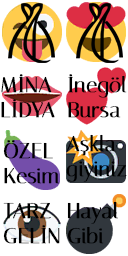
<style>
.page{position:relative;width:128px;height:256px;background:#ffffff}
.page>*{position:absolute;margin:0}
.t1{font:21.3px "Italiana-Regular";color:#000000;font-weight:bold}
</style>
<div class="page">
<p class="t1" style="left:1px;top:74px;width:54px;height:44px">MİNA<br>LİDYA</p>
<p class="t1" style="left:68px;top:74px;width:59px;height:44px">İnegöl<br>Bursa</p>
<p class="t1" style="left:66px;top:134px;width:61px;height:48px">Aşkla<br>giyiniz</p>
<p class="t1" style="left:3px;top:140px;width:57px;height:44px">ÖZEL<br>Kesim</p>
<p class="t1" style="left:3px;top:202px;width:57px;height:42px">TARZ<br>GELİN</p>
<p class="t1" style="left:67px;top:201px;width:51px;height:43px">Hayal<br>Gibi</p>
</div>
